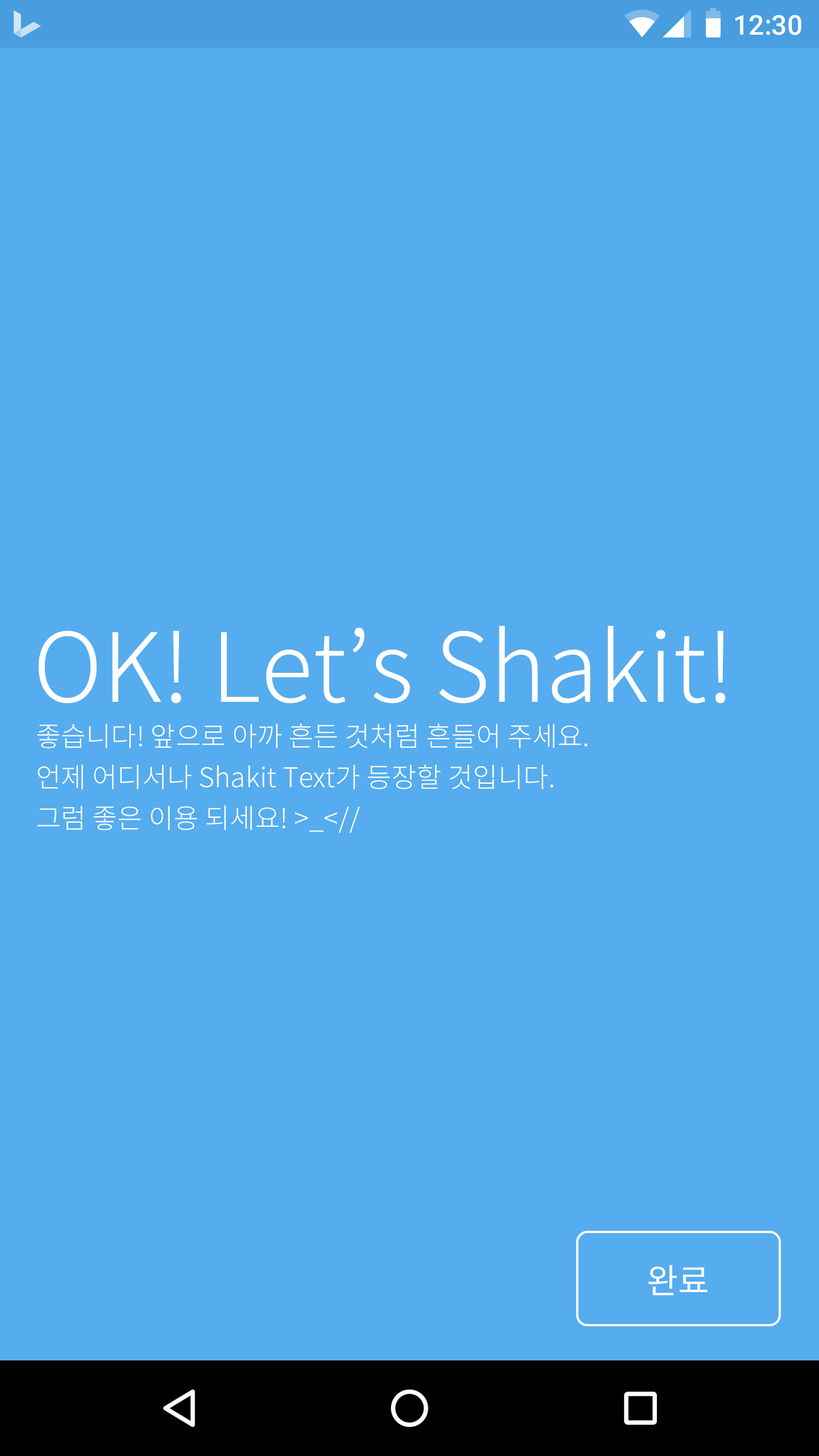
<style>
.page{position:relative;width:819px;height:1456px;background:#55acee}
.page>*{position:absolute;margin:0}
.t1{font:27.3px "Roboto-Medium";color:#ffffff}
.t2{font:95.5px "NotoSansCJKkr-Light";color:#ffffff}
.t3{font:27.3px/40.9px "NotoSansCJKkr-Light";color:#ffffff}
.t4{font:34.1px "NotoSansCJKkr-Regular";color:#ffffff}
</style>
<div class="page">
<p class="t1" style="left:735px;top:15px;width:66px;height:20px">12:30</p>
<p class="t2" style="left:39px;top:626px;width:687px;height:78px">OK! Let’s Shakit!</p>
<p class="t3" style="left:37px;top:723px;width:551px;height:110px">좋습니다! 앞으로 아까 흔든 것처럼 흔들어 주세요.<br>언제 어디서나 Shakit Text가 등장할 것입니다.<br>그럼 좋은 이용 되세요! &gt;_&lt;//</p>
<p class="t4" style="left:648px;top:1265px;width:60px;height:31px">완료</p>
</div>
